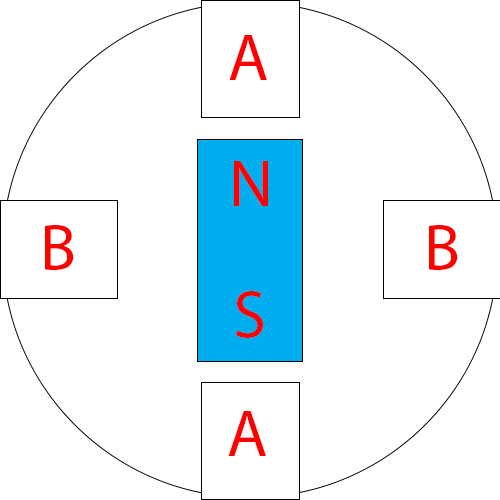
<style>
.page{position:relative;width:500px;height:500px;background:#ffffff}
.page>*{position:absolute;margin:0}
.t1{font:66.7px "MyriadPro-Regular";color:#ff0000}
</style>
<div class="page">
<p class="t1" style="left:229px;top:35px;width:38px;height:45px">A</p>
<p class="t1" style="left:234px;top:161px;width:34px;height:45px">N</p>
<p class="t1" style="left:45px;top:225px;width:29px;height:45px">B</p>
<p class="t1" style="left:429px;top:225px;width:29px;height:45px">B</p>
<p class="t1" style="left:236px;top:291px;width:27px;height:47px">S</p>
<p class="t1" style="left:228px;top:411px;width:38px;height:45px">A</p>
</div>
